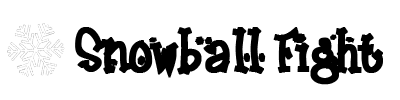
<style>
.page{position:relative;width:400px;height:100px;background:#ffffff}
.page>*{position:absolute;margin:0}
.t1{font:50px "Frosty";color:#000000;font-weight:bold}
</style>
<div class="page">
<p class="t1" style="left:75px;top:27px;width:308px;height:58px">Snowball Fight</p>
</div>
